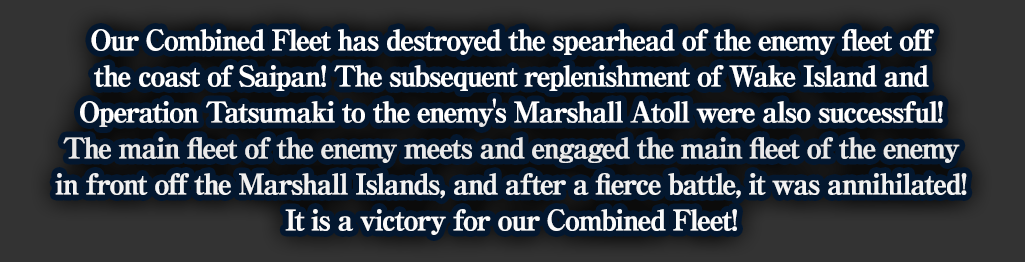
<style>
.page{position:relative;width:1025px;height:262px;background:#03172f}
.page>*{position:absolute;margin:0}
.t1{font:28px/36px "RyuminPro-ExBold";letter-spacing:-0.08em;color:#ffffff;font-weight:bold}
</style>
<div class="page">
<p class="t1" style="left:55px;top:29px;width:912px;height:206px;text-align:center">Our Combined Fleet has destroyed the spearhead of the enemy fleet off<br>the coast of Saipan! The subsequent replenishment of Wake Island and<br>Operation Tatsumaki to the enemy's Marshall Atoll were also successful!<br>The main fleet of the enemy meets and engaged the main fleet of the enemy<br>in front off the Marshall Islands, and after a fierce battle, it was annihilated!<br>It is a victory for our Combined Fleet!</p>
</div>
